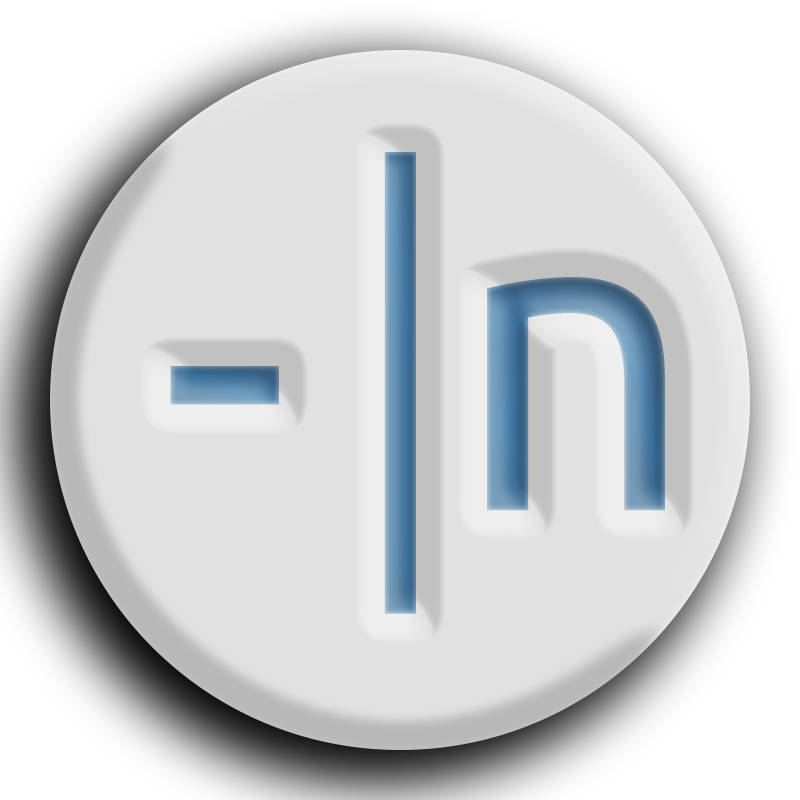
<style>
.page{position:relative;width:800px;height:800px;background:#e1e1e1}
.page>*{position:absolute;margin:0}
.t1{font:491.7px "UbuntuMonoDerivativePowerline-Regular"}
.t2{font:491.7px "ArialNarrow"}
</style>
<div class="page">
<p class="t1" style="left:170px;top:152px;width:495px;height:462px">-<span class="t2">|</span>n</p>
</div>
